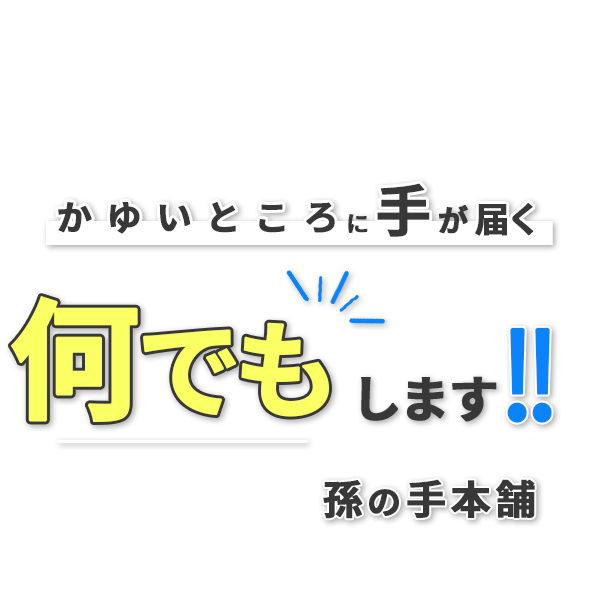
<style>
.page{position:relative;width:615px;height:615px;background:#ffffff}
.page>*{position:absolute;margin:0}
.t1{font:55.2px "SourceHanSansJP-Bold";letter-spacing:0.1em;color:#383838;font-weight:bold}
.t2{font:35.2px "SourceHanSansJP-Bold";letter-spacing:0.48em;color:#383838;font-weight:bold}
.t3{font:30.1px "SourceHanSansJP-Bold";letter-spacing:0.1em;color:#383838;font-weight:bold}
.t4{font:35.1px "SourceHanSansJP-Bold";letter-spacing:0.1em;color:#383838;font-weight:bold}
.t5{font:22.3px "SourceHanSansJP-Bold";letter-spacing:0.1em;color:#383838;font-weight:bold}
.t6{font:105.2px "SourceHanSansJP-Bold";letter-spacing:0.1em;color:#faff64;font-weight:bold}
.t7{font:131.5px "SourceHanSansJP-Bold";letter-spacing:0.1em;color:#faff64;font-weight:bold}
.t8{font:120px "SourceHanSansJP-Regular";letter-spacing:0.1em;color:#0b83fa;font-weight:bold}
.t9{font:50px "SourceHanSansJP-Bold";letter-spacing:0.1em;color:#383838;font-weight:bold}
.t10{font:40.1px "SourceHanSansJP-Bold";letter-spacing:0.1em;color:#383838;font-weight:bold}
.t11{font:33.4px "SourceHanSansJP-Bold";letter-spacing:0.1em;color:#383838;font-weight:bold}
</style>
<div class="page">
<p class="t1" style="left:377px;top:183px;width:53px;height:54px">手</p>
<p class="t2" style="left:58px;top:202px;width:277px;height:32px">かゆいところ</p>
<p class="t3" style="left:439px;top:205px;width:29px;height:29px">が</p>
<p class="t4" style="left:475px;top:203px;width:59px;height:33px">届く</p>
<p class="t5" style="left:348px;top:214px;width:20px;height:19px">に</p>
<p class="t6" style="left:10px;top:296px;width:319px;height:126px"><span class="t7">何</span>でも</p>
<p class="t8" style="left:507px;top:327px;width:45px;height:96px">!!</p>
<p class="t9" style="left:361px;top:376px;width:136px;height:46px">します</p>
<p class="t10" style="left:323px;top:479px;width:212px;height:40px">孫<span class="t11">の</span>手本舗</p>
</div>
